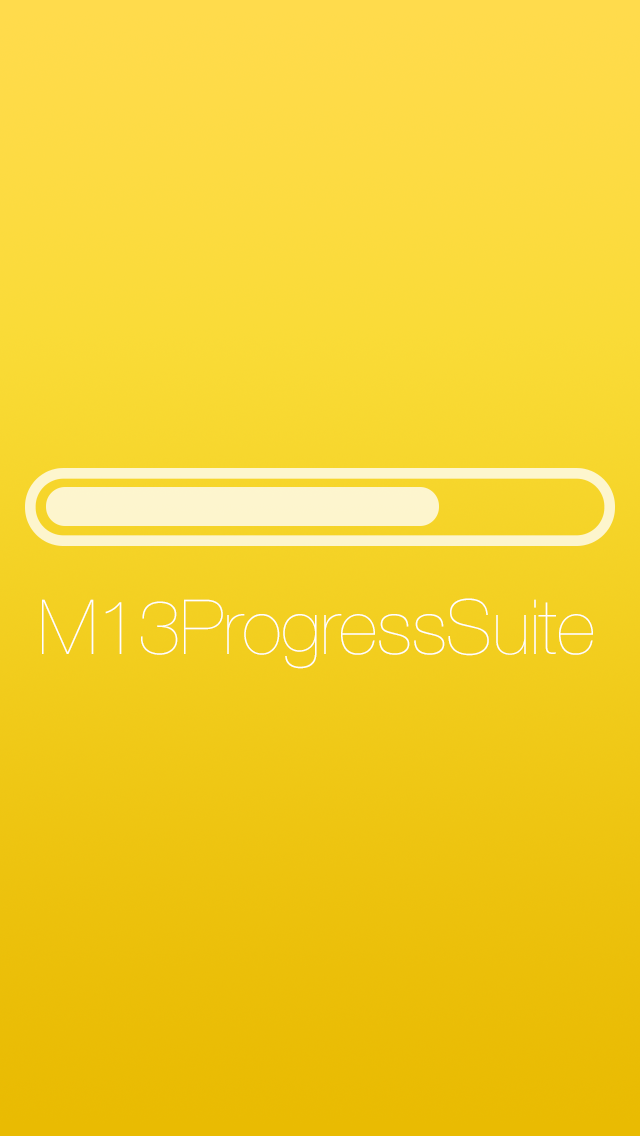
<style>
.page{position:relative;width:640px;height:1136px}
.page>*{position:absolute;margin:0}
.t1{font:76px "HelveticaNeue-UltraLight";letter-spacing:-0.007em;color:#ffffff}
</style>
<div class="page">
<p class="t1" style="left:42px;top:598px;width:551px;height:71px">M13ProgressSuite</p>
</div>
